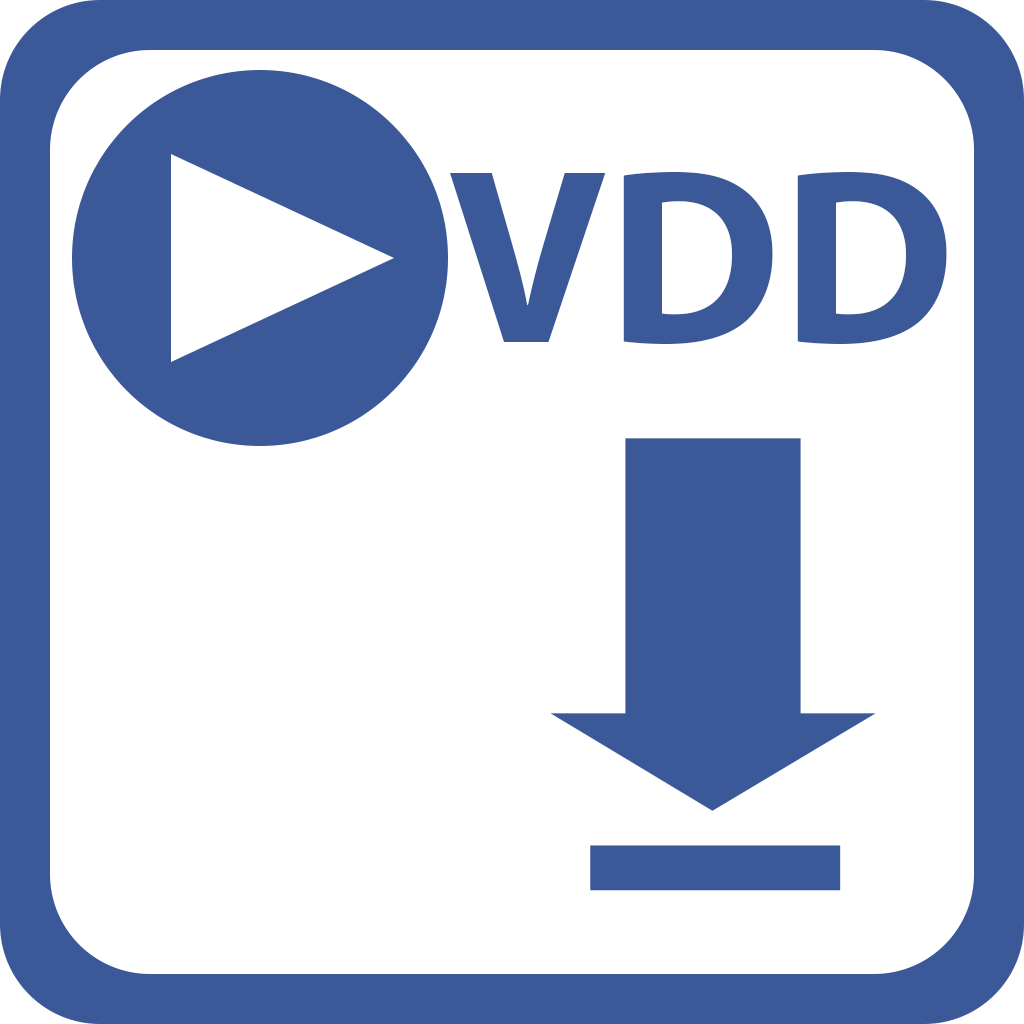
<style>
.page{position:relative;width:1024px;height:1024px;background:#ffffff}
.page>*{position:absolute;margin:0}
.t1{font:250px "MyriadPro-Bold";color:#3b5998}
</style>
<div class="page">
<p class="t1" style="left:450px;top:172px;width:497px;height:172px">VDD</p>
</div>
